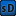
<style>
.page{position:relative;width:16px;height:16px}
.page>*{position:absolute;margin:0}
.t1{font:11px "MyriadPro-Bold";letter-spacing:0.1em;color:#1f2933}
</style>
<div class="page">
<p class="t1" style="left:2px;top:4px;width:12px;height:8px">sD</p>
</div>
